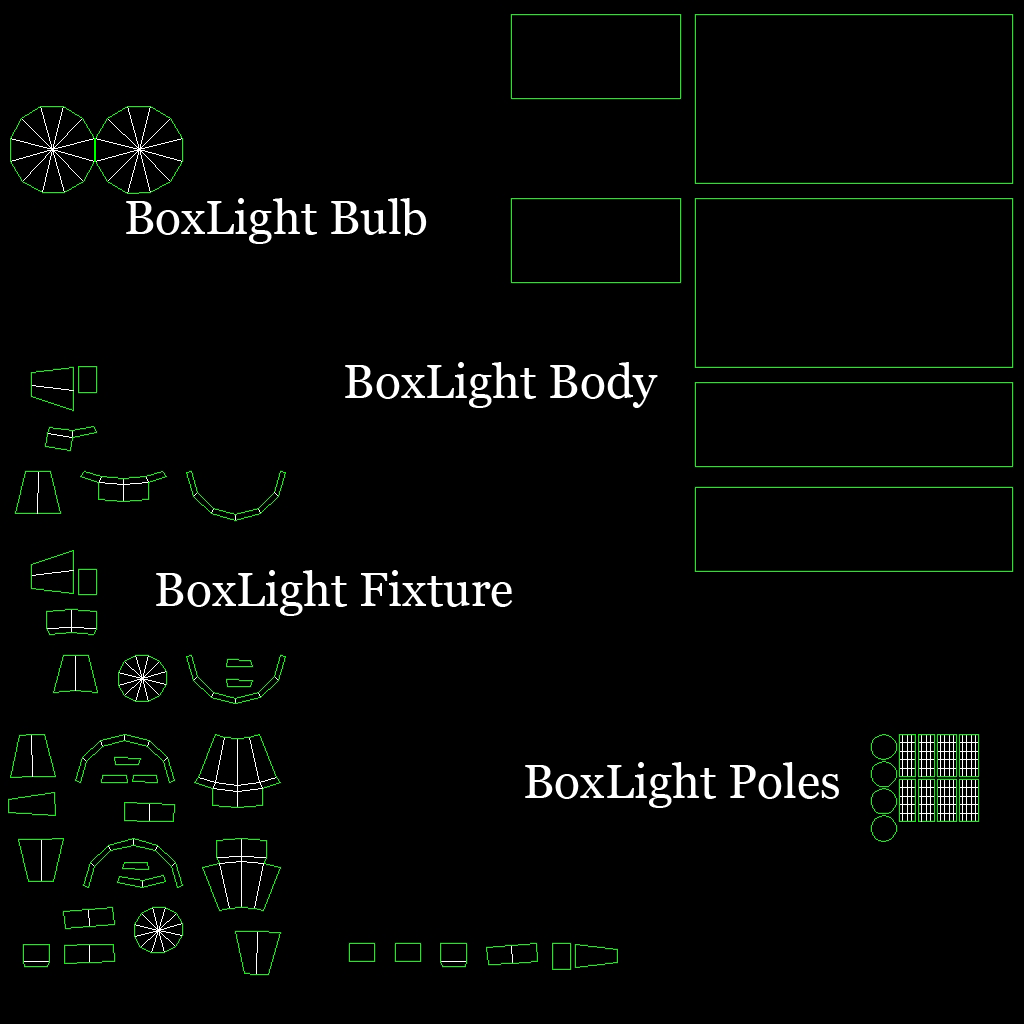
<style>
.page{position:relative;width:1024px;height:1024px;background:#000000}
.page>*{position:absolute;margin:0}
.t1{font:48px "Georgia";color:#ffffff}
</style>
<div class="page">
<p class="t1" style="left:126px;top:198px;width:301px;height:46px">BoxLight Bulb</p>
<p class="t1" style="left:345px;top:362px;width:313px;height:46px">BoxLight Body</p>
<p class="t1" style="left:156px;top:570px;width:357px;height:46px">BoxLight Fixture</p>
<p class="t1" style="left:525px;top:762px;width:314px;height:46px">BoxLight Poles</p>
</div>
